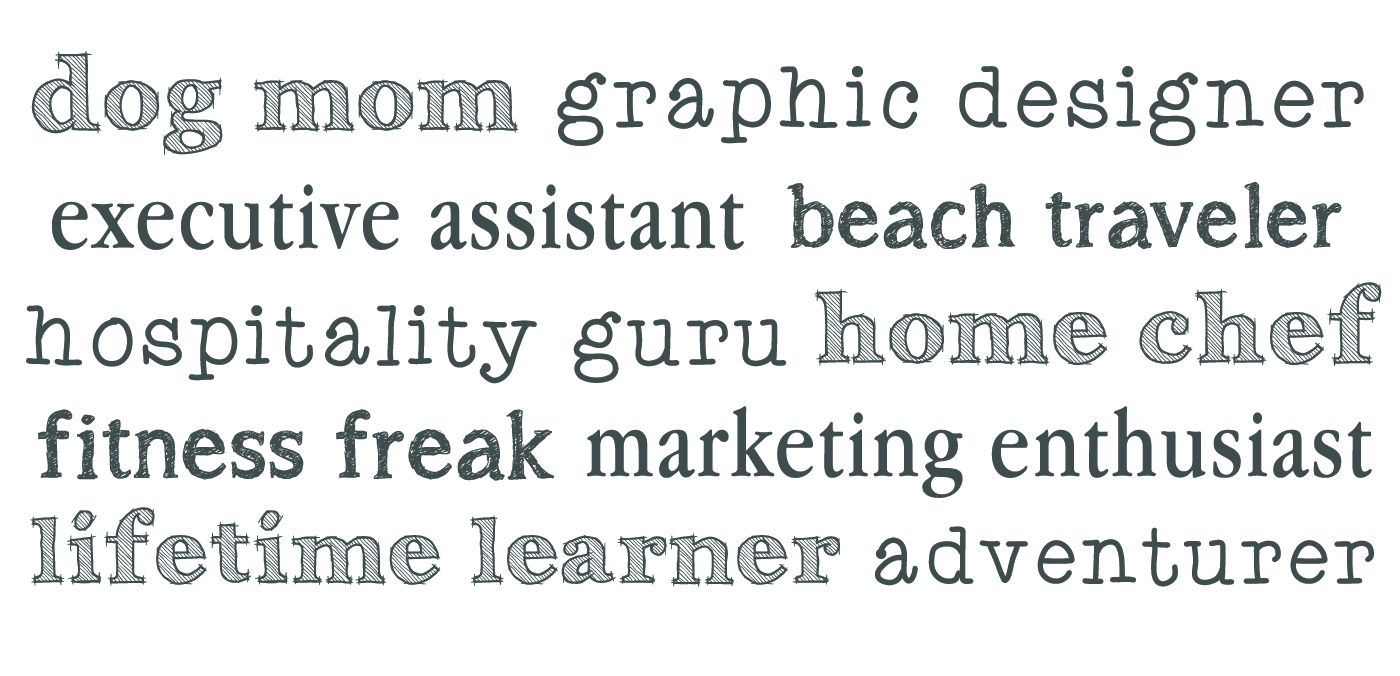
<style>
.page{position:relative;width:1400px;height:676px;background:#ffffff}
.page>*{position:absolute;margin:0}
.t1{font:100px "Archistico-Bold";letter-spacing:0.025em;color:#3f4c4e}
.t2{font:90.6px "AniTypewriter";letter-spacing:0.025em;color:#3f4c4e}
.t3{font:100px "AppleGaramond";letter-spacing:0.025em;color:#3f4c4e}
.t4{font:105.7px "asongforjennifer";letter-spacing:0.025em;color:#3f4c4e}
.t5{font:88.1px "AniTypewriter";letter-spacing:0.025em;color:#3f4c4e}
.t6{font:114.1px "asongforjennifer";letter-spacing:0.025em;color:#3f4c4e}
.t7{font:93.6px "Archistico-Bold";letter-spacing:0.025em;color:#3f4c4e}
.t8{font:84.8px "AniTypewriter";letter-spacing:0.025em;color:#3f4c4e}
</style>
<div class="page">
<p class="t1" style="left:31px;top:51px;width:488px;height:105px">dog mom</p>
<p class="t2" style="left:557px;top:66px;width:807px;height:80px">graphic designer</p>
<p class="t3" style="left:52px;top:184px;width:692px;height:66px">executive assistant</p>
<p class="t4" style="left:787px;top:182px;width:555px;height:67px">beach traveler</p>
<p class="t1" style="left:814px;top:282px;width:568px;height:85px">home chef</p>
<p class="t5" style="left:26px;top:305px;width:761px;height:79px">hospitality guru</p>
<p class="t6" style="left:38px;top:409px;width:516px;height:72px">fitness freak</p>
<p class="t3" style="left:587px;top:406px;width:785px;height:92px">marketing enthusiast</p>
<p class="t7" style="left:30px;top:507px;width:810px;height:80px">lifetime learner</p>
<p class="t8" style="left:875px;top:526px;width:499px;height:61px">adventurer</p>
</div>
